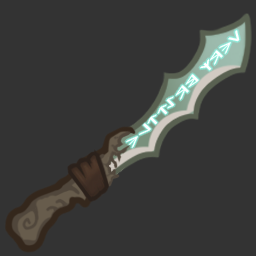
<style>
.page{position:relative;width:256px;height:256px;background:#333333}
.page>*{position:absolute;margin:0}
.t1{font:10.9px "ComicRunes";color:#ffffff;scale:3.15 1}
</style>
<div class="page">
<p class="t1" style="left:126px;top:30px;width:114px;height:118px;rotate:135deg">VERY BRITTLE</p>
</div>
